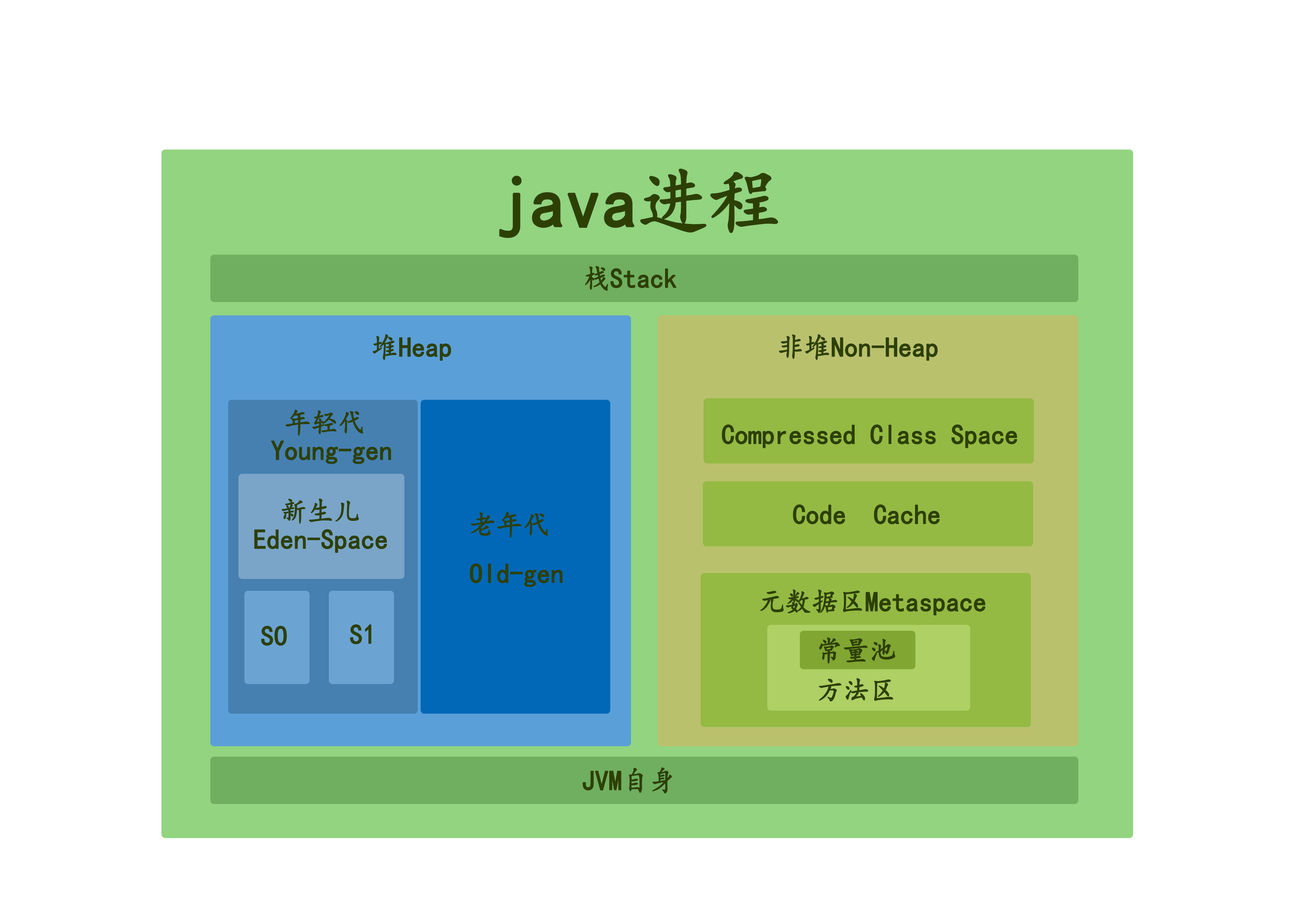
<style>
.page{position:relative;width:1299px;height:918px;background:#ffffff}
.page>*{position:absolute;margin:0}
.t1{font:74px "KaiTi";letter-spacing:-0.015em;color:#2d4004;font-weight:bold;scale:0.95 1}
.t2{font:27.8px "KaiTi";letter-spacing:-0.015em;color:#2d4004;font-weight:bold;scale:0.95 1}
.t3{font:27.8px/27.8px "KaiTi";letter-spacing:-0.015em;color:#2d4004;font-weight:bold;scale:0.95 1}
</style>
<div class="page">
<p class="t1" style="left:499px;top:168px;width:279px;height:70px">java进程</p>
<p class="t2" style="left:585px;top:266px;width:91px;height:25px">栈Stack</p>
<p class="t2" style="left:372px;top:334px;width:79px;height:27px">堆Heap</p>
<p class="t2" style="left:779px;top:334px;width:159px;height:27px">非堆Non-Heap</p>
<p class="t3" style="left:271px;top:409px;width:120px;height:55px">年轻代<br>Young-gen</p>
<p class="t2" style="left:722px;top:424px;width:295px;height:24px">Compressed Class Space</p>
<p class="t3" style="left:254px;top:498px;width:133px;height:55px">新生儿<br>Eden-Space</p>
<p class="t2" style="left:793px;top:504px;width:147px;height:21px">Code  Cache</p>
<p class="t2" style="left:469px;top:512px;width:94px;height:75px">老年代<br>Old-gen</p>
<p class="t2" style="left:760px;top:589px;width:225px;height:27px">元数据区Metaspace</p>
<p class="t2" style="left:261px;top:626px;width:26px;height:20px">SO</p>
<p class="t2" style="left:350px;top:624px;width:21px;height:21px">S1</p>
<p class="t2" style="left:819px;top:638px;width:76px;height:26px">常量池</p>
<p class="t2" style="left:819px;top:678px;width:74px;height:24px">方法区</p>
<p class="t2" style="left:582px;top:767px;width:90px;height:27px">JVM自身</p>
</div>
